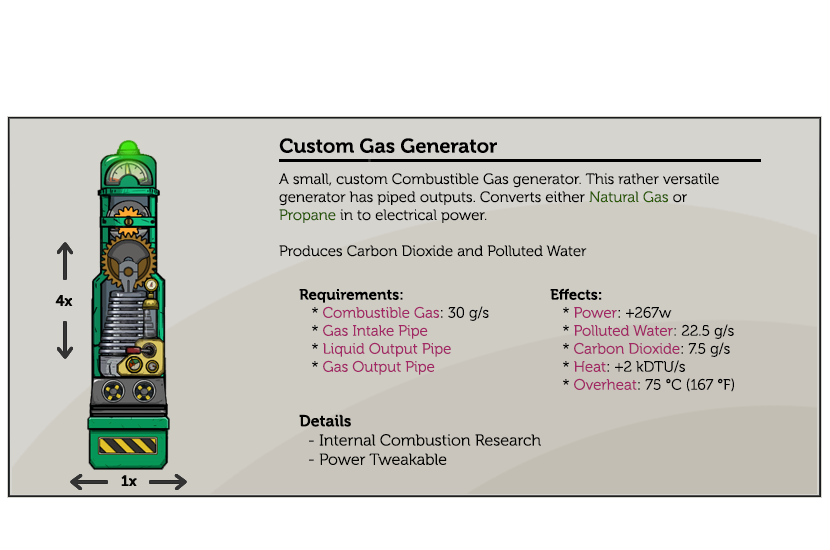
<style>
.page{position:relative;width:830px;height:550px;background:#ffffff}
.page>*{position:absolute;margin:0}
.t1{font:20px "Museo-700";color:#000000}
.t2{font:15px "Museo-300";color:#000000}
.t3{font:15px "Museo-300";color:#2c5904}
.t4{font:15px "Museo-300";color:#265601}
.t5{font:15px "Museo-700";color:#000000}
.t6{font:15px "Museo-300";color:#a12864}
.t7{font:16px "Museo-300";color:#040403}
.t8{font:16px "Museo-700";color:#040403}
</style>
<div class="page">
<p class="t1" style="left:279px;top:138px;width:218px;height:15px">Custom Gas Generator</p>
<p class="t2" style="left:279px;top:173px;width:440px;height:84px">A small, custom Combustible Gas generator. This rather versatile generator has piped outputs. Converts either <span class="t3">Natural Gas</span> or <span class="t4">Propane</span> in to electrical power.<br><br>Produces Carbon Dioxide and Polluted Water</p>
<p class="t2" style="left:299px;top:289px;width:190px;height:86px"><span class="t5">Requirements:</span><br>   * <span class="t6">Combustible Gas</span>: 30 g/s                    <br>   * <span class="t6">Gas Intake Pipe<br></span>   * <span class="t6">Liquid Output Pipe<br></span>   * <span class="t6">Gas Output Pipe</span></p>
<p class="t2" style="left:550px;top:288px;width:184px;height:104px"><span class="t5">Effects:</span><br>   * <span class="t6">Power</span>: +267w                   <br>   * <span class="t6">Polluted Water</span>: 22.5 g/s<br>   * <span class="t6">Carbon Dioxide</span>: 7.5 g/s<br>   * <span class="t6">Heat</span>: +2 kDTU/s<br>   * <span class="t6">Overheat</span>: 75 °C (167 °F)</p>
<p class="t7" style="left:299px;top:414px;width:242px;height:51px"><span class="t8">Details<br></span>  - Internal Combustion Research<br>  - Power Tweakable</p>
</div>
